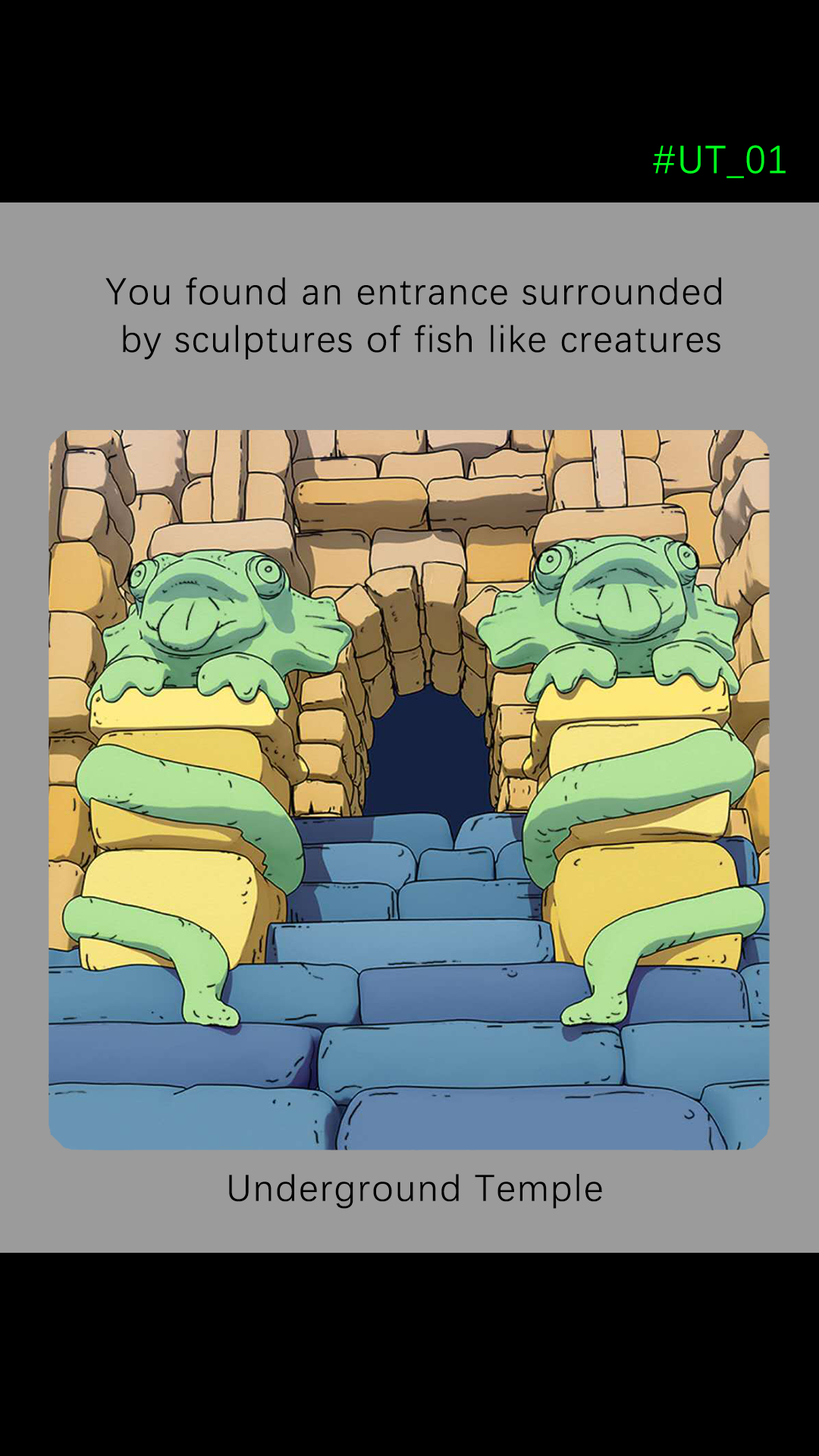
<style>
.page{position:relative;width:819px;height:1456px;background:#000000}
.page>*{position:absolute;margin:0}
.t1{font:39.2px "DengXian-Regular";letter-spacing:0.04em;color:#00ff1e}
.t2{font:37.9px/47.6px "DengXian-Regular";letter-spacing:0.04em;color:#000000}
.t3{font:37.9px "DengXian-Regular";letter-spacing:0.04em;color:#000000}
</style>
<div class="page">
<p class="t1" style="left:653px;top:145px;width:133px;height:33px">#UT_01</p>
<p class="t2" style="left:105px;top:277px;width:616px;height:82px;text-align:center">You found an entrance surrounded <br>by sculptures of fish like creatures</p>
<p class="t3" style="left:229px;top:1174px;width:373px;height:35px">Underground Temple</p>
</div>
